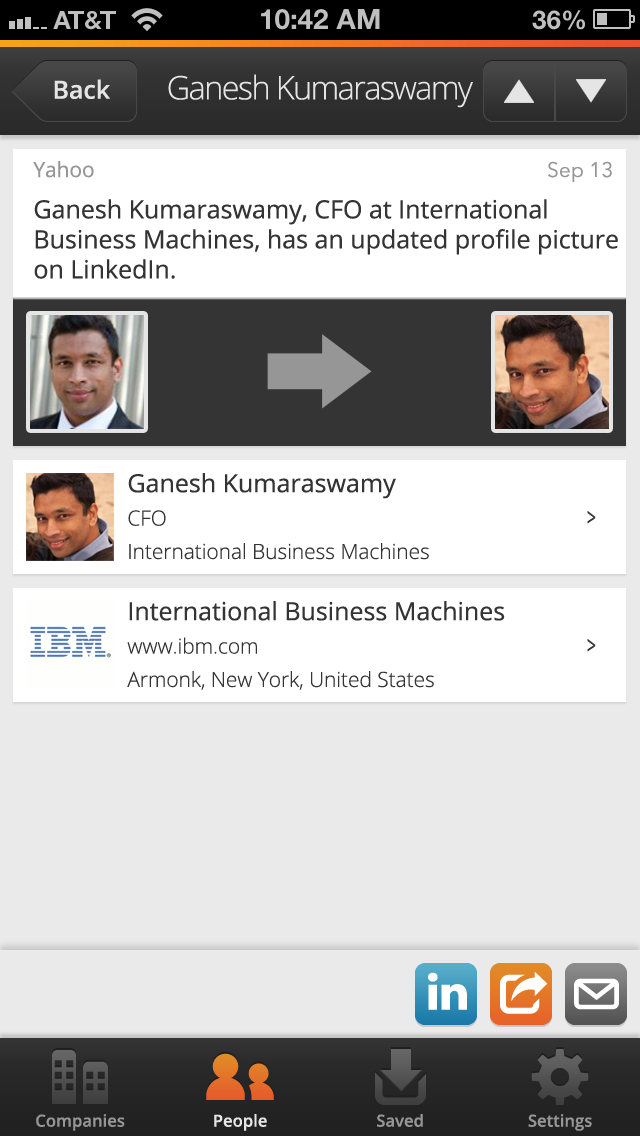
<style>
.page{position:relative;width:640px;height:1136px;background:#ffffff}
.page>*{position:absolute;margin:0}
.t1{font:32.5px "OpenSans-Light";letter-spacing:-0.05em;color:#e5e5e5}
.t2{font:25px "OpenSans-Semibold";color:#e5e5e5}
.t3{font:25px "OpenSans";color:#343434}
.t4{font:20.8px "OpenSans";color:#969696}
.t5{font:20.8px "AvenirNext-Regular";color:#969696}
.t6{font:20.8px "OpenSans-Light";color:#343434}
.t7{font:25px "OpenSans";color:#343434;scale:0.64 1}
.t8{font:16.7px "OpenSans-Semibold";color:#969696}
.t9{font:16.7px "OpenSans-Semibold";color:#e5e5e5}
</style>
<div class="page">
<p class="t1" style="left:168px;top:74px;width:305px;height:34px">Ganesh Kumaraswamy</p>
<p class="t2" style="left:54px;top:79px;width:57px;height:20px">Back</p>
<p class="t3" style="left:33px;top:161px;width:585px;height:118px"><span class="t4">Yahoo<br></span>Ganesh Kumaraswamy, CFO at International Business Machines, has an updated profile picture on LinkedIn.</p>
<p class="t5" style="left:548px;top:161px;width:64px;height:21px">Sep 13</p>
<p class="t6" style="left:128px;top:473px;width:301px;height:87px"><span class="t3">Ganesh Kumaraswamy<br></span>CFO<br>International Business Machines</p>
<p class="t7" style="left:587px;top:511px;width:9px;height:13px">&gt;</p>
<p class="t6" style="left:127px;top:601px;width:378px;height:89px"><span class="t3">International Business Machines<br></span>www.ibm.com<br>Armonk, New York, United States</p>
<p class="t7" style="left:587px;top:639px;width:9px;height:13px">&gt;</p>
<p class="t8" style="left:36px;top:1114px;width:89px;height:17px">Companies</p>
<p class="t9" style="left:214px;top:1114px;width:53px;height:17px">People</p>
<p class="t8" style="left:377px;top:1114px;width:46px;height:13px">Saved</p>
<p class="t8" style="left:528px;top:1114px;width:64px;height:17px">Settings</p>
</div>
